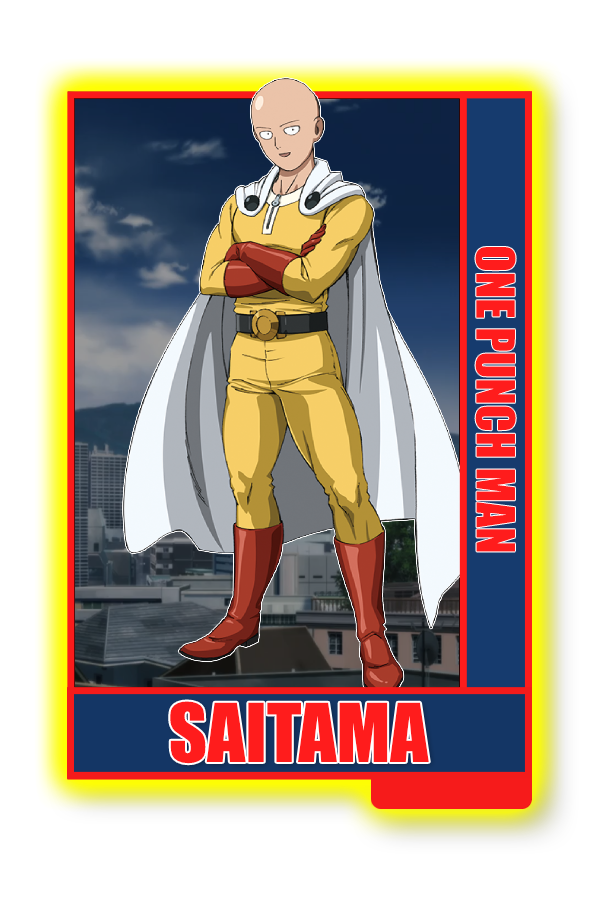
<style>
.page{position:relative;width:600px;height:900px;background:#ffffff}
.page>*{position:absolute;margin:0}
.t1{font:48.8px "Impact";color:#ff1c1c}
.t2{font:75px "Impact";color:#ff1c1c}
</style>
<div class="page">
<p class="t1" style="left:475px;top:246px;width:41px;height:306px;rotate:90deg">ONE PUNCH MAN</p>
<p class="t2" style="left:170px;top:701px;width:259px;height:63px">SAITAMA</p>
</div>
